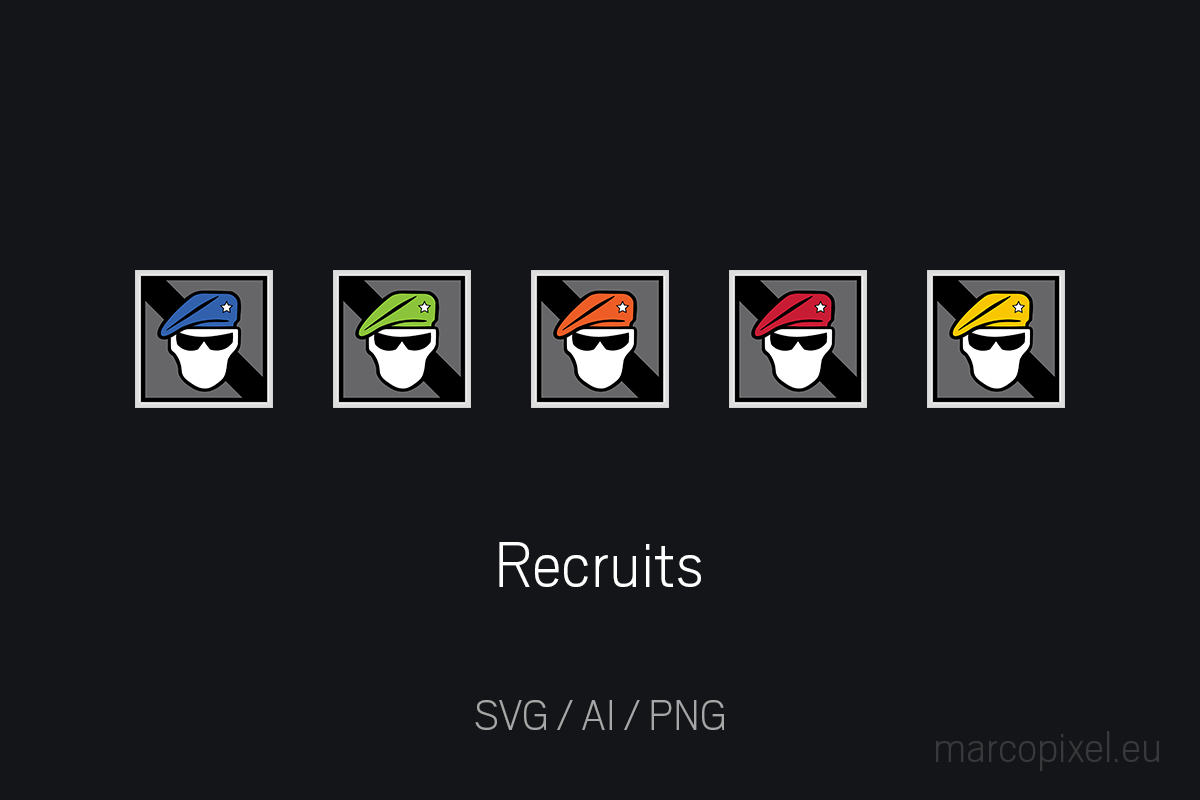
<style>
.page{position:relative;width:1200px;height:800px;background:#141518}
.page>*{position:absolute;margin:0}
.t1{font:72px "Scout-ExtraLight";color:#ffffff}
.t2{font:48px "Scout-ExtraLight";color:#a7a7a8}
.t3{font:48px "Scout-ExtraLight";color:#38393b}
</style>
<div class="page">
<p class="t1" style="left:499px;top:542px;width:202px;height:45px">Recruits</p>
<p class="t2" style="left:475px;top:700px;width:249px;height:30px">SVG / AI / PNG</p>
<p class="t3" style="left:936px;top:731px;width:223px;height:40px">marcopixel.eu</p>
</div>
